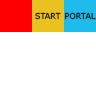
<style>
.page{position:relative;width:96px;height:96px;background:#ffffff}
.page>*{position:absolute;margin:0}
.t1{font:8px "Verdana";color:#000000}
.t2{font:8px "Verdana"}
</style>
<div class="page">
<p class="t1" style="left:35px;top:12px;width:26px;height:8px">START</p>
<p class="t2" style="left:65px;top:12px;width:31px;height:8px">PORTAL</p>
</div>
